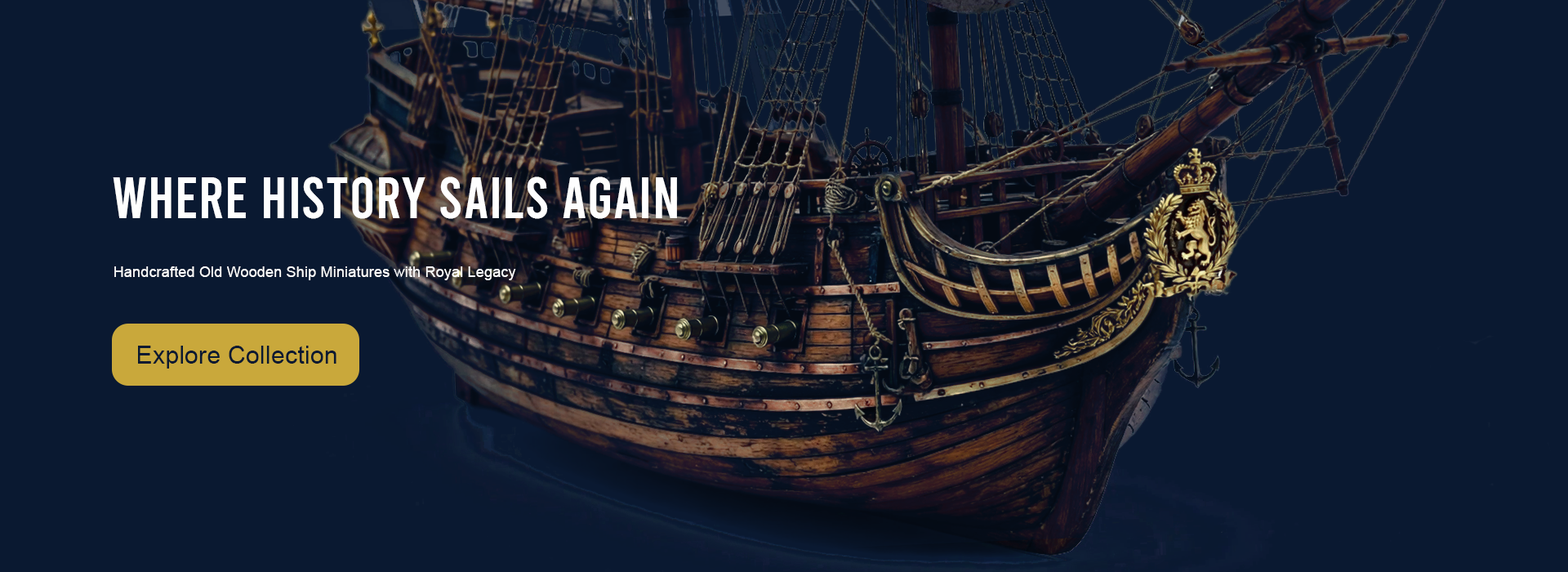
<style>
.page{position:relative;width:1568px;height:572px;background:#0a1931}
.page>*{position:absolute;margin:0}
.t1{font:58.8px "Bebas-Regular";letter-spacing:0.01em;color:#fefefe}
.t2{font:14.7px "ArialMT";letter-spacing:0.01em;color:#fefefe}
.t3{font:24.5px "ArialMT";letter-spacing:0.01em;color:#0a1931}
</style>
<div class="page">
<p class="t1" style="left:113px;top:176px;width:564px;height:43px">Where History Sails Again</p>
<p class="t2" style="left:114px;top:266px;width:402px;height:14px">Handcrafted Old Wooden Ship Miniatures with Royal Legacy</p>
<p class="t3" style="left:138px;top:345px;width:198px;height:23px">Explore Collection</p>
</div>
